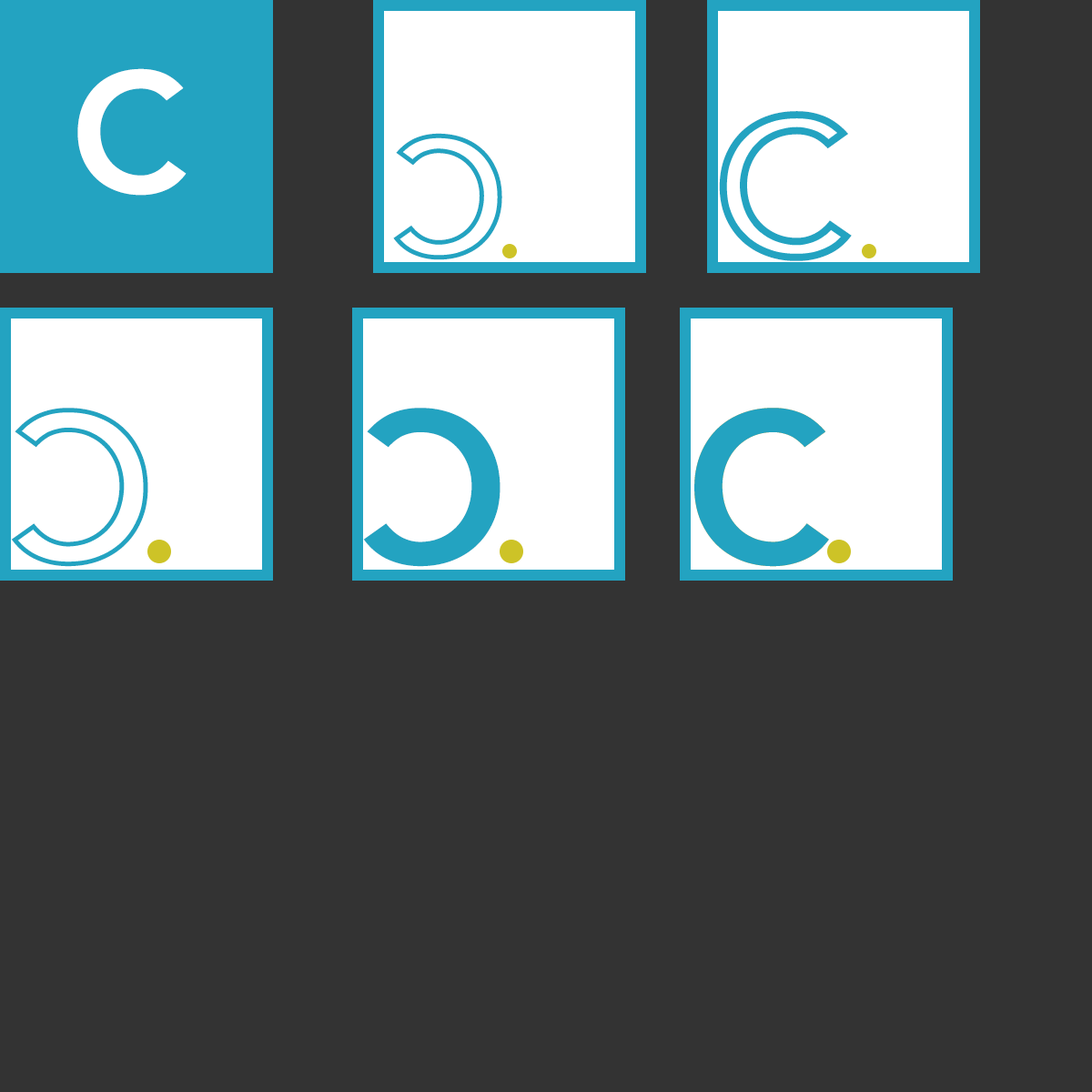
<style>
.page{position:relative;width:1092px;height:1092px;background:#333333}
.page>*{position:absolute;margin:0}
.t1{font:169.3px "Avenir-Heavy";color:#ffffff}
.t2{font:201px "Avenir-Heavy"}
.t3{font:169.3px "Avenir-Heavy"}
.t4{font:212.4px "Avenir-Heavy";color:#ffffff}
.t5{font:212.4px "Avenir-Heavy";color:#23a3c1}
</style>
<div class="page">
<p class="t1" style="left:77px;top:68px;width:110px;height:128px">C</p>
<p class="t2" style="left:719px;top:111px;width:133px;height:150px">C</p>
<p class="t3" style="left:393px;top:133px;width:109px;height:127px;rotate:180deg">C</p>
<p class="t4" style="left:11px;top:408px;width:137px;height:159px;rotate:180deg">C</p>
<p class="t5" style="left:363px;top:408px;width:137px;height:159px;rotate:180deg">C</p>
<p class="t5" style="left:694px;top:408px;width:135px;height:159px">C</p>
<p class="t5" style="left:694px;top:408px;width:135px;height:159px">C</p>
</div>
